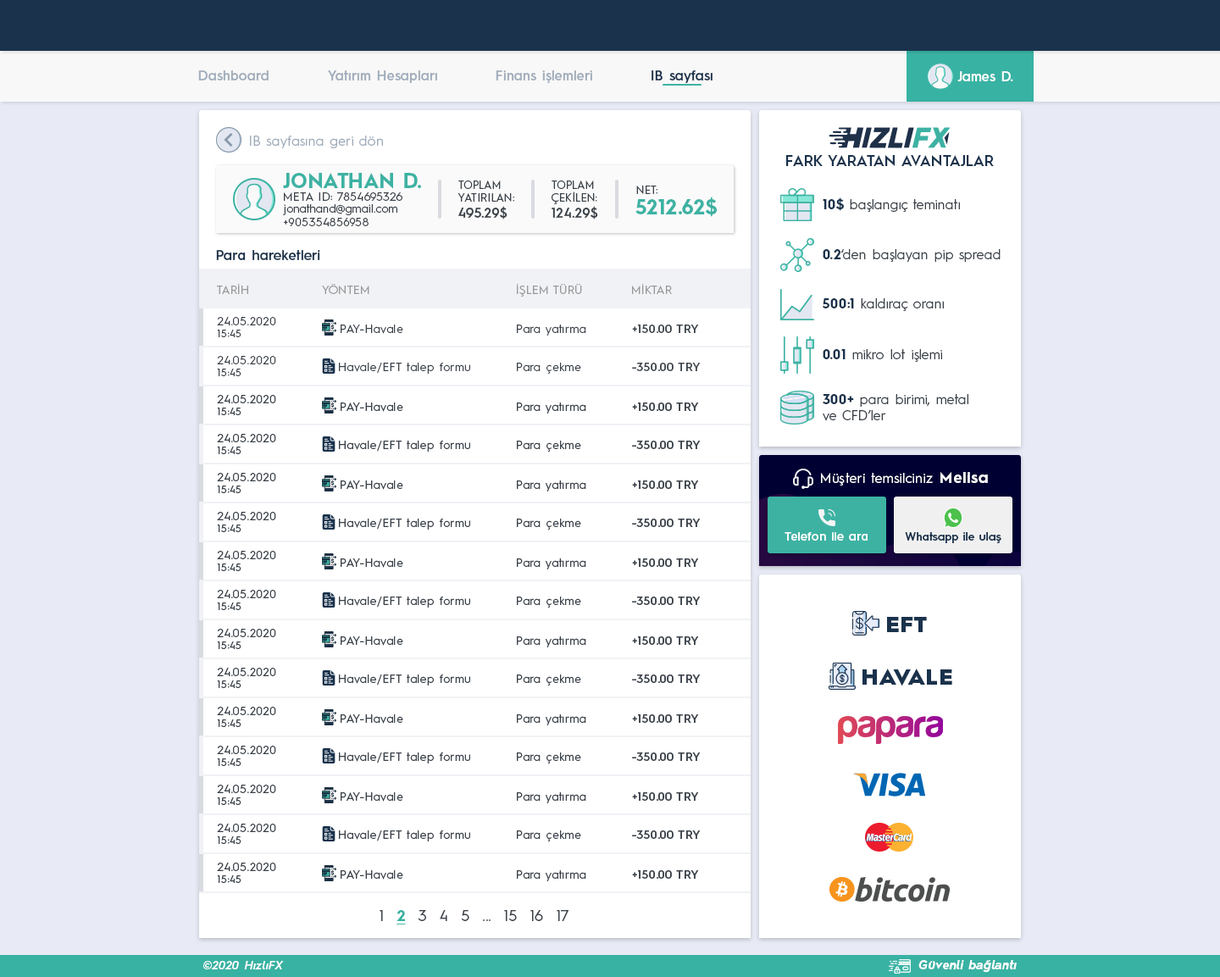
<style>
.page{position:relative;width:1220px;height:977px;background:#ffffff}
.page>*{position:absolute;margin:0}
.t1{font:13.6px "HurmeGeometricSans3-SemiBold";color:#a1adbb}
.t2{font:13.6px "HurmeGeometricSans3-SemiBold";color:#1a324c}
.t3{font:13.6px "HurmeGeometricSans3-SemiBold";color:#fefefe}
.t4{font:13.6px "HurmeGeometricSans1-Regular";letter-spacing:0.01em;color:#a1adbb}
.t5{font:15.3px "HurmeGeometricSans1-SemiBold";color:#1a324c}
.t6{font:20.3px "HurmeGeometricSans1-Bold";letter-spacing:0.01em;color:#3db2a3}
.t7{font:11px "HurmeGeometricSans1-Regular";letter-spacing:0.01em;color:#3a4149}
.t8{font:13.6px "HurmeGeometricSans1-SemiBold";letter-spacing:0.01em;color:#3a4149}
.t9{font:11.9px "HurmeGeometricSans1-Regular";letter-spacing:0.01em;color:#3a4149}
.t10{font:13.6px "HurmeGeometricSans1-Regular";color:#3a4149}
.t11{font:13.6px "HurmeGeometricSans1-Bold";color:#1a324c}
.t12{font:13.6px "HurmeGeometricSans3-SemiBold";letter-spacing:0.01em;color:#1a324c}
.t13{font:11.9px "HurmeGeometricSans1-Regular";color:#999999}
.t14{font:11.9px/11.9px "HurmeGeometricSans1-Regular";letter-spacing:0.025em;color:#3a4149}
.t15{font:10.2px/11.9px "HurmeGeometricSans1-Regular";letter-spacing:0.025em;color:#3a4149}
.t16{font:11.9px "HurmeGeometricSans1-Regular";letter-spacing:0.025em;color:#3a4149}
.t17{font:11.9px "HurmeGeometricSans1-SemiBold";letter-spacing:0.025em;color:#3a4149}
.t18{font:13.6px "HurmeGeometricSans1-Regular";letter-spacing:0.025em;color:#ffffff}
.t19{font:15.3px "HurmeGeometricSans1-Bold";letter-spacing:0.05em;color:#ffffff}
.t20{font:11.9px "HurmeGeometricSans3-SemiBold";letter-spacing:0.01em;color:#ffffff}
.t21{font:11.4px "HurmeGeometricSans3-SemiBold";letter-spacing:0.01em;color:#1a324c}
.t22{font:22.5px "HurmeGeometricSans1-Black";letter-spacing:0.025em;color:#1a324c}
.t23{font:15.3px "HurmeGeometricSans1-Regular";letter-spacing:0.025em;color:#3a4149}
.t24{font:15.3px "HurmeGeometricSans1-Bold";letter-spacing:0.025em;color:#38b2a3;text-decoration:underline}
.t25{font:11.9px "HurmeGeometricSans2-SemiBoldObl";letter-spacing:0.025em;color:#ffffff}
.t26{font:11.9px "HurmeGeometricSans2-BoldObl";letter-spacing:0.025em;color:#ffffff}
</style>
<div class="page">
<p class="t1" style="left:198px;top:70px;width:71px;height:11px">Dashboard</p>
<p class="t1" style="left:328px;top:70px;width:109px;height:13px">Yatırım Hesapları</p>
<p class="t1" style="left:496px;top:70px;width:96px;height:13px">Finans işlemleri</p>
<p class="t2" style="left:652px;top:70px;width:61px;height:13px">IB sayfası</p>
<p class="t3" style="left:958px;top:71px;width:56px;height:10px">James D.</p>
<p class="t4" style="left:250px;top:136px;width:133px;height:12px">IB sayfasına geri dön</p>
<p class="t5" style="left:786px;top:155px;width:208px;height:11px">FARK YARATAN AVANTAJLAR</p>
<p class="t6" style="left:283px;top:173px;width:138px;height:16px">JONATHAN D.</p>
<p class="t7" style="left:458px;top:181px;width:56px;height:38px">TOPLAM<br>YATIRILAN:<br><span class="t8">495.29$</span></p>
<p class="t7" style="left:552px;top:181px;width:46px;height:38px">TOPLAM<br>ÇEKİLEN:<br><span class="t8">124.29$</span></p>
<p class="t7" style="left:636px;top:186px;width:22px;height:8px">NET:</p>
<p class="t9" style="left:284px;top:192px;width:119px;height:9px">META ID: 7854695326</p>
<p class="t6" style="left:636px;top:197px;width:81px;height:20px">5212.62$</p>
<p class="t10" style="left:823px;top:197px;width:137px;height:15px"><span class="t11">10$</span> başlangıç teminatı</p>
<p class="t9" style="left:283px;top:204px;width:114px;height:22px">jonathand@gmail.com<br>+905354856958</p>
<p class="t12" style="left:216px;top:250px;width:104px;height:10px">Para hareketleri</p>
<p class="t10" style="left:823px;top:249px;width:178px;height:13px"><span class="t11">0.2</span>‘den başlayan pip spread</p>
<p class="t13" style="left:217px;top:284px;width:31px;height:10px">TARİH</p>
<p class="t13" style="left:322px;top:284px;width:47px;height:10px">YÖNTEM</p>
<p class="t13" style="left:516px;top:284px;width:66px;height:13px">İŞLEM TÜRÜ</p>
<p class="t13" style="left:632px;top:284px;width:40px;height:10px">MİKTAR</p>
<p class="t10" style="left:822px;top:298px;width:122px;height:13px"><span class="t11">500:1</span> kaldıraç oranı</p>
<p class="t14" style="left:217px;top:317px;width:59px;height:20px">24.05.2020<br><span class="t15">15:45</span></p>
<p class="t16" style="left:341px;top:325px;width:62px;height:9px">PAY-Havale</p>
<p class="t16" style="left:517px;top:325px;width:69px;height:11px">Para yatırma</p>
<p class="t17" style="left:632px;top:325px;width:67px;height:8px">+150.00 TRY</p>
<p class="t10" style="left:823px;top:349px;width:119px;height:13px"><span class="t11">0.01</span> mikro lot işlemi</p>
<p class="t14" style="left:217px;top:356px;width:59px;height:20px">24.05.2020<br><span class="t15">15:45</span></p>
<p class="t16" style="left:339px;top:363px;width:131px;height:11px">Havale/EFT talep formu</p>
<p class="t16" style="left:517px;top:363px;width:64px;height:11px">Para çekme</p>
<p class="t17" style="left:632px;top:363px;width:69px;height:8px">-350.00 TRY</p>
<p class="t10" style="left:823px;top:394px;width:146px;height:27px"><span class="t11">300+</span> para birimi, metal<br>ve CFD’ler</p>
<p class="t18" style="left:821px;top:472px;width:167px;height:14px">Müşteri temsilciniz <span class="t19">Melisa</span></p>
<p class="t20" style="left:785px;top:532px;width:83px;height:9px">Telefon ile ara</p>
<p class="t21" style="left:905px;top:532px;width:97px;height:11px">Whatsapp ile ulaş</p>
<p class="t22" style="left:887px;top:617px;width:40px;height:15px">EFT</p>
<p class="t22" style="left:863px;top:669px;width:90px;height:17px">HAVALE</p>
<p class="t23" style="left:380px;top:910px;width:189px;height:15px">1  <span class="t24">2</span>  3  4  5  ...  15  16  17</p>
<p class="t25" style="left:203px;top:961px;width:81px;height:8px">©2020 HızlıFX</p>
<p class="t26" style="left:919px;top:960px;width:98px;height:13px">Güvenli bağlantı</p>
</div>
